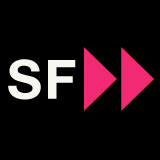
<style>
.page{position:relative;width:160px;height:160px;background:#000000}
.page>*{position:absolute;margin:0}
.t1{font:54.3px "HelveticaNeue-Bold";letter-spacing:0.035em;color:#f6f8f0;text-transform:uppercase}
</style>
<div class="page">
<p class="t1" style="left:8px;top:59px;width:68px;height:41px">SF</p>
</div>
